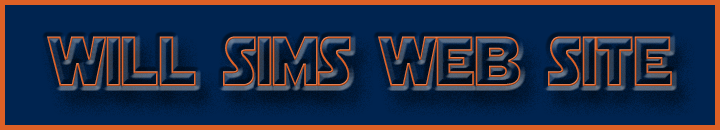
<style>
.page{position:relative;width:720px;height:130px;background:#002450}
.page>*{position:absolute;margin:0}
.t1{font:70.2px "StarJediHollow";color:#dd6026;scale:0.84 1}
</style>
<div class="page">
<p class="t1" style="left:47px;top:36px;width:625px;height:50px">will sims web site</p>
</div>
